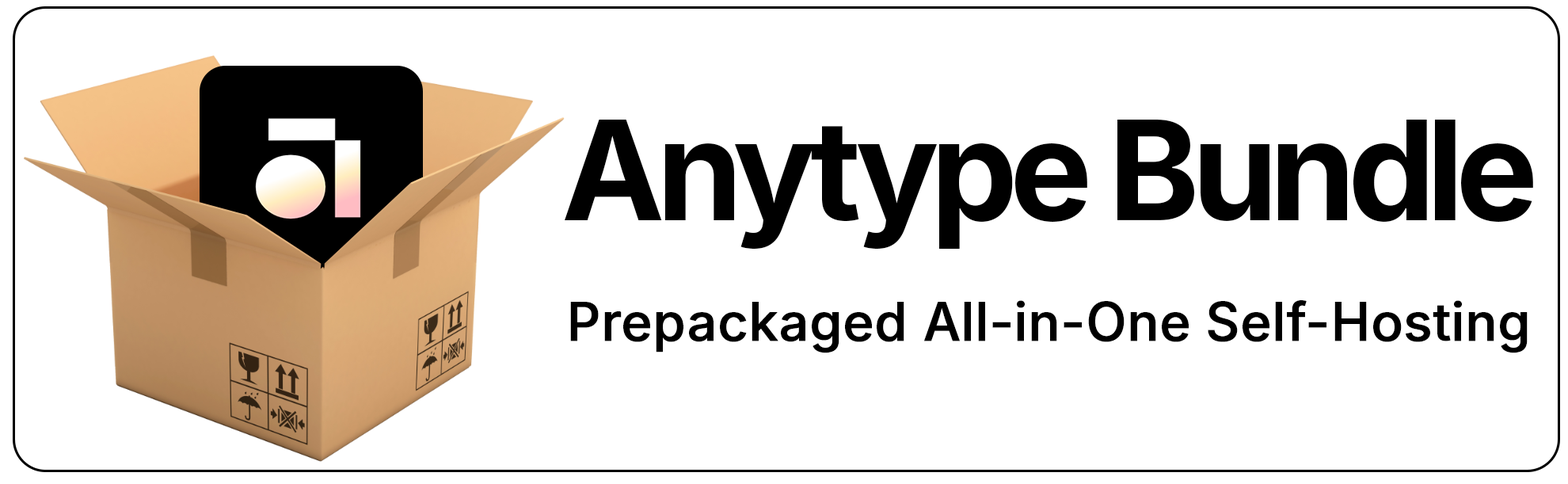
<style>
.page{position:relative;width:1568px;height:484px;background:#ffffff}
.page>*{position:absolute;margin:0}
.t1{font:138.6px "Inter-Bold";letter-spacing:-0.06em;color:#000000}
.t2{font:52.8px "Inter-Medium";color:#000000;font-weight:bold}
</style>
<div class="page">
<p class="t1" style="left:565px;top:120px;width:968px;height:129px">Anytype Bundle</p>
<p class="t2" style="left:570px;top:300px;width:958px;height:53px">Prepackaged All-in-One Self-Hosting</p>
</div>
